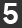
<style>
.page{position:relative;width:22px;height:28px;background:#333333}
.page>*{position:absolute;margin:0}
.t1{font:30px "ProductSans-Bold";color:#ffffff}
</style>
<div class="page">
<p class="t1" style="left:3px;top:3px;width:15px;height:21px">5</p>
</div>
